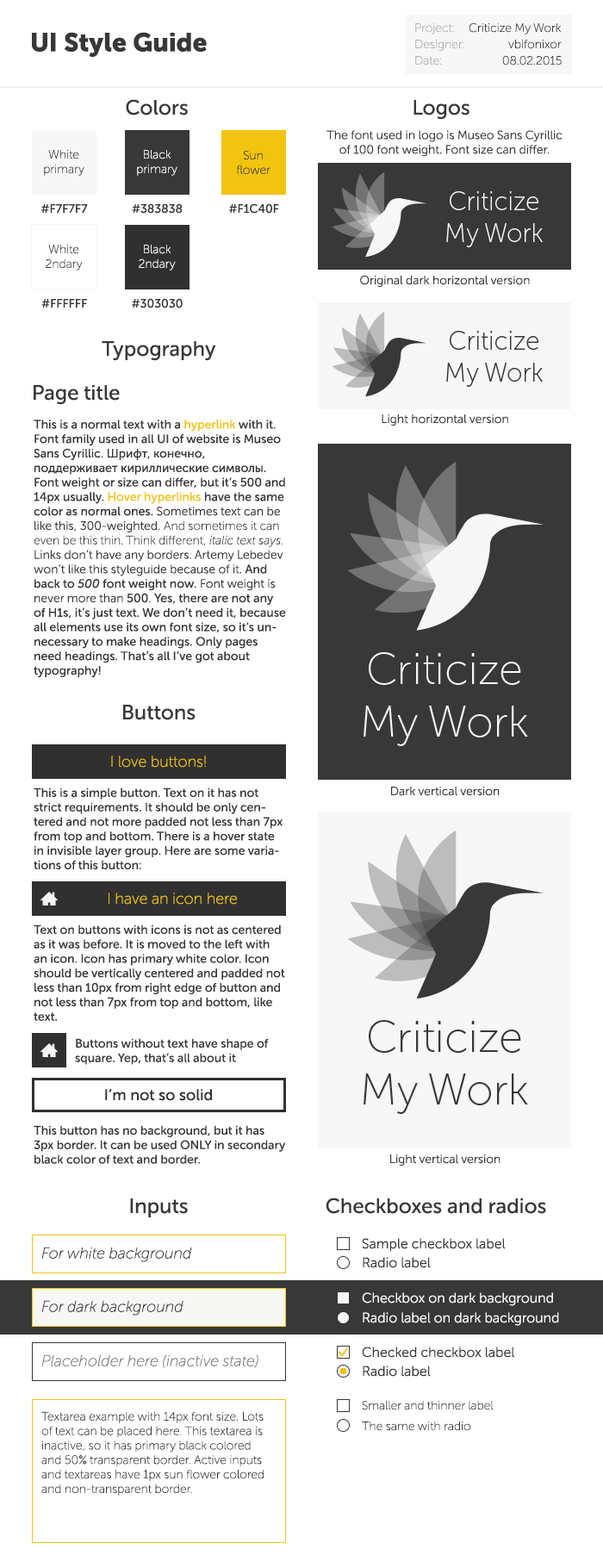
<style>
.page{position:relative;width:603px;height:1568px;background:#ffffff}
.page>*{position:absolute;margin:0}
.t1{font:12.1px "MuseoSansCyrl-100";color:#adadad}
.t2{font:12.1px "MuseoSansCyrl-100";color:#383838}
.t3{font:25.8px "MuseoSansCyrl-900";color:#383838}
.t4{font:25.8px "MuseoSansCyrl-900";color:#383838;text-transform:uppercase}
.t5{font:20.7px "MuseoSansCyrl-500";color:#383838}
.t6{font:12.1px "MuseoSansCyrl-300";color:#383838}
.t7{font:12.1px "MuseoSansCyrl-100";color:#f7f7f7}
.t8{font:12.1px "MuseoSansCyrl-500";color:#383838}
.t9{font:12.1px "MuseoSansCyrl-500";color:#f1c40f}
.t10{font:12.1px "MuseoSansCyrl-100Italic";color:#383838}
.t11{font:12.1px "MuseoSansCyrl-500Italic";color:#383838}
.t12{font:15.5px "MuseoSansCyrl-100";color:#f1c40f}
.t13{font:15.5px "MuseoSansCyrl-500";color:#303030}
.t14{font:13.8px "MuseoSansCyrl-300";color:#383838}
.t15{font:15.5px "MuseoSansCyrl-100Italic";color:#383838}
.t16{font:13.8px "MuseoSansCyrl-300";color:#f7f7f5}
.t17{font:13.8px "MuseoSansCyrl-300";color:#f7f7f7}
.t18{font:15.5px "MuseoSansCyrl-100Italic";color:#7c7c7c}
</style>
<div class="page">
<p class="t1" style="left:415px;top:23px;width:39px;height:11px">Project:</p>
<p class="t2" style="left:469px;top:23px;width:93px;height:11px">Criticize My Work</p>
<p class="t3" style="left:32px;top:32px;width:175px;height:25px"><span class="t4">UI </span>Style Guide</p>
<p class="t1" style="left:415px;top:40px;width:49px;height:11px">Designer:</p>
<p class="t2" style="left:508px;top:40px;width:54px;height:9px">vbifonixor</p>
<p class="t1" style="left:415px;top:56px;width:27px;height:9px">Date:</p>
<p class="t2" style="left:502px;top:56px;width:60px;height:9px">08.02.2015</p>
<p class="t5" style="left:126px;top:99px;width:62px;height:16px">Colors</p>
<p class="t5" style="left:414px;top:100px;width:56px;height:20px">Logos</p>
<p class="t6" style="left:327px;top:130px;width:236px;height:27px;text-align:center">The font used in logo is Museo Sans Cyrillic<br>of 100 font weight. Font size can differ.</p>
<p class="t2" style="left:44px;top:150px;width:40px;height:26px;text-align:center">White<br>primary</p>
<p class="t7" style="left:137px;top:150px;width:40px;height:26px;text-align:center">Black<br>primary</p>
<p class="t2" style="left:236px;top:151px;width:35px;height:23px;text-align:center">Sun<br>flower</p>
<p class="t8" style="left:40px;top:204px;width:48px;height:9px">#F7F7F7</p>
<p class="t8" style="left:132px;top:203px;width:51px;height:11px">#383838</p>
<p class="t8" style="left:228px;top:203px;width:51px;height:11px">#F1C40F</p>
<p class="t2" style="left:46px;top:245px;width:37px;height:26px;text-align:center">White<br>2ndary</p>
<p class="t7" style="left:139px;top:245px;width:37px;height:26px;text-align:center">Black<br>2ndary</p>
<p class="t6" style="left:360px;top:275px;width:170px;height:12px">Original dark horizontal version</p>
<p class="t8" style="left:41px;top:299px;width:46px;height:9px">#FFFFFF</p>
<p class="t8" style="left:132px;top:298px;width:51px;height:10px">#303030</p>
<p class="t5" style="left:102px;top:341px;width:114px;height:20px">Typography</p>
<p class="t5" style="left:34px;top:385px;width:86px;height:20px">Page title</p>
<p class="t8" style="left:34px;top:420px;width:252px;height:257px;text-align:right">This is a normal text with a <span class="t9">hyperlink</span> with it. Font family used in all UI of website is Museo Sans Cyrillic. Шрифт, конечно, поддерживает кириллические символы. Font weight or size can differ, but it’s 500 and 14px usually. <span class="t9">Hover hyperlinks</span> have the same color as normal ones. <span class="t6">Sometimes text can be like this, 300-weighted. </span><span class="t2">And sometimes it can even be this thin. Think different, </span><span class="t10">italic text says</span><span class="t2">. </span><span class="t6">Links don’t have any borders. Artemy Lebedev won’t like this styleguide because of it. </span>And back to <span class="t11">500</span> font weight now.<span class="t6"> Font weight is never more than </span>500<span class="t6">. </span>Yes, there are not any of H1s, it’s just text. We don’t need it, because all elements use its own font size, so it’s unnecessary to make headings. Only pages need headings. That’s all I’ve got about typography!</p>
<p class="t6" style="left:382px;top:414px;width:126px;height:12px">Light horizontal version</p>
<p class="t5" style="left:123px;top:705px;width:73px;height:15px">Buttons</p>
<p class="t12" style="left:111px;top:756px;width:95px;height:12px">I love buttons!</p>
<p class="t8" style="left:34px;top:787px;width:249px;height:83px;text-align:right">This is a simple button. Text on it has not strict requirements. It should be only centered and not more padded not less than 7px from top and bottom. There is a hover state in invisible layer group. Here are some variations of this button:</p>
<p class="t6" style="left:391px;top:787px;width:109px;height:9px">Dark vertical version</p>
<p class="t12" style="left:109px;top:893px;width:128px;height:12px">I have an icon here</p>
<p class="t8" style="left:34px;top:924px;width:251px;height:97px;text-align:right">Text on buttons with icons is not as centered as it was before. It is moved to the left with an icon. Icon has primary white color. Icon should be vertically centered and padded not less than 10px from right edge of button and not less than 7px from top and bottom, like text.</p>
<p class="t8" style="left:75px;top:1038px;width:194px;height:27px;text-align:right">Buttons without text have shape of       square. Yep, that’s all about it</p>
<p class="t13" style="left:105px;top:1089px;width:107px;height:12px">I’m not so solid</p>
<p class="t8" style="left:34px;top:1125px;width:252px;height:39px;text-align:right">This button has no background, but it has 3px border. It can be used ONLY in secondary black color of text and border.</p>
<p class="t6" style="left:390px;top:1154px;width:111px;height:12px">Light vertical version</p>
<p class="t5" style="left:130px;top:1198px;width:58px;height:19px">Inputs</p>
<p class="t5" style="left:326px;top:1198px;width:220px;height:16px">Checkboxes and radios</p>
<p class="t14" style="left:362px;top:1238px;width:144px;height:14px">Sample checkbox label</p>
<p class="t15" style="left:41px;top:1247px;width:151px;height:15px">For white background</p>
<p class="t14" style="left:363px;top:1257px;width:68px;height:11px">Radio label</p>
<p class="t15" style="left:41px;top:1300px;width:143px;height:16px">For dark background</p>
<p class="t16" style="left:362px;top:1292px;width:191px;height:14px">Checkbox on dark background</p>
<p class="t17" style="left:363px;top:1312px;width:196px;height:14px">Radio label on dark background</p>
<p class="t14" style="left:362px;top:1347px;width:152px;height:11px">Checked checkbox label</p>
<p class="t18" style="left:41px;top:1354px;width:217px;height:14px">Placeholder here (inactive state)</p>
<p class="t14" style="left:363px;top:1366px;width:68px;height:11px">Radio label</p>
<p class="t2" style="left:362px;top:1401px;width:132px;height:9px">Smaller and thinner label</p>
<p class="t2" style="left:41px;top:1411px;width:223px;height:85px;text-align:right">Textarea example with 14px font size. Lots of text can be placed here. This textarea is inactive, so it has primary black colored and 50% transparent border. Active inputs and textareas have 1px sun flower colored and non-transparent border.</p>
<p class="t2" style="left:362px;top:1422px;width:109px;height:9px">The same with radio</p>
</div>
